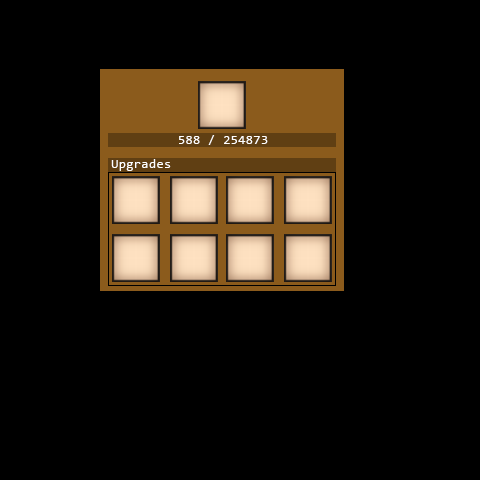
<style>
.page{position:relative;width:480px;height:480px;background:#000000}
.page>*{position:absolute;margin:0}
.t1{font:13.5px "Consolas";letter-spacing:0.01em;color:#ffffff}
</style>
<div class="page">
<p class="t1" style="left:179px;top:135px;width:89px;height:10px">588 / 254873</p>
<p class="t1" style="left:111px;top:159px;width:60px;height:12px">Upgrades</p>
</div>
